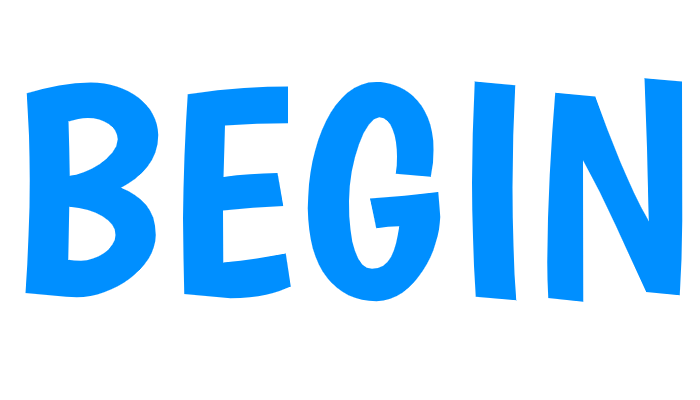
<style>
.page{position:relative;width:700px;height:400px;background:#ffffff}
.page>*{position:absolute;margin:0}
.t1{font:300px "Boogaloo-Regular";color:#008fff}
</style>
<div class="page">
<p class="t1" style="left:25px;top:78px;width:658px;height:224px">BEGIN</p>
</div>
